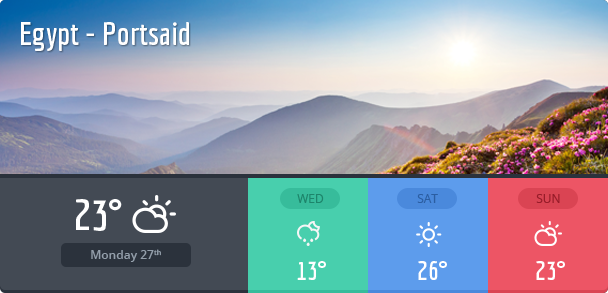
<style>
.page{position:relative;width:608px;height:293px}
.page>*{position:absolute;margin:0}
.t1{font:32px "Economica-Bold";color:#ffffff}
.t2{font:12px "OpenSans";color:#1d856b}
.t3{font:12px "OpenSans";color:#2b5ea2}
.t4{font:12px "OpenSans";color:#971c29}
.t5{font:42px "Economica-Bold";color:#ffffff}
.t6{font:12px "OpenSans-Semibold";color:#949fab}
.t7{font:26px "Economica-Bold";color:#ffffff}
</style>
<div class="page">
<p class="t1" style="left:21px;top:22px;width:168px;height:29px">Egypt - Portsaid</p>
<p class="t2" style="left:297px;top:194px;width:27px;height:9px">WED</p>
<p class="t3" style="left:417px;top:194px;width:21px;height:9px">SAT</p>
<p class="t4" style="left:536px;top:194px;width:24px;height:9px">SUN</p>
<p class="t5" style="left:76px;top:199px;width:46px;height:32px">23°</p>
<p class="t6" style="left:91px;top:249px;width:70px;height:13px">Monday 27th</p>
<p class="t7" style="left:297px;top:261px;width:29px;height:19px">13°</p>
<p class="t7" style="left:418px;top:261px;width:29px;height:19px">26°</p>
<p class="t7" style="left:536px;top:261px;width:29px;height:19px">23°</p>
</div>
